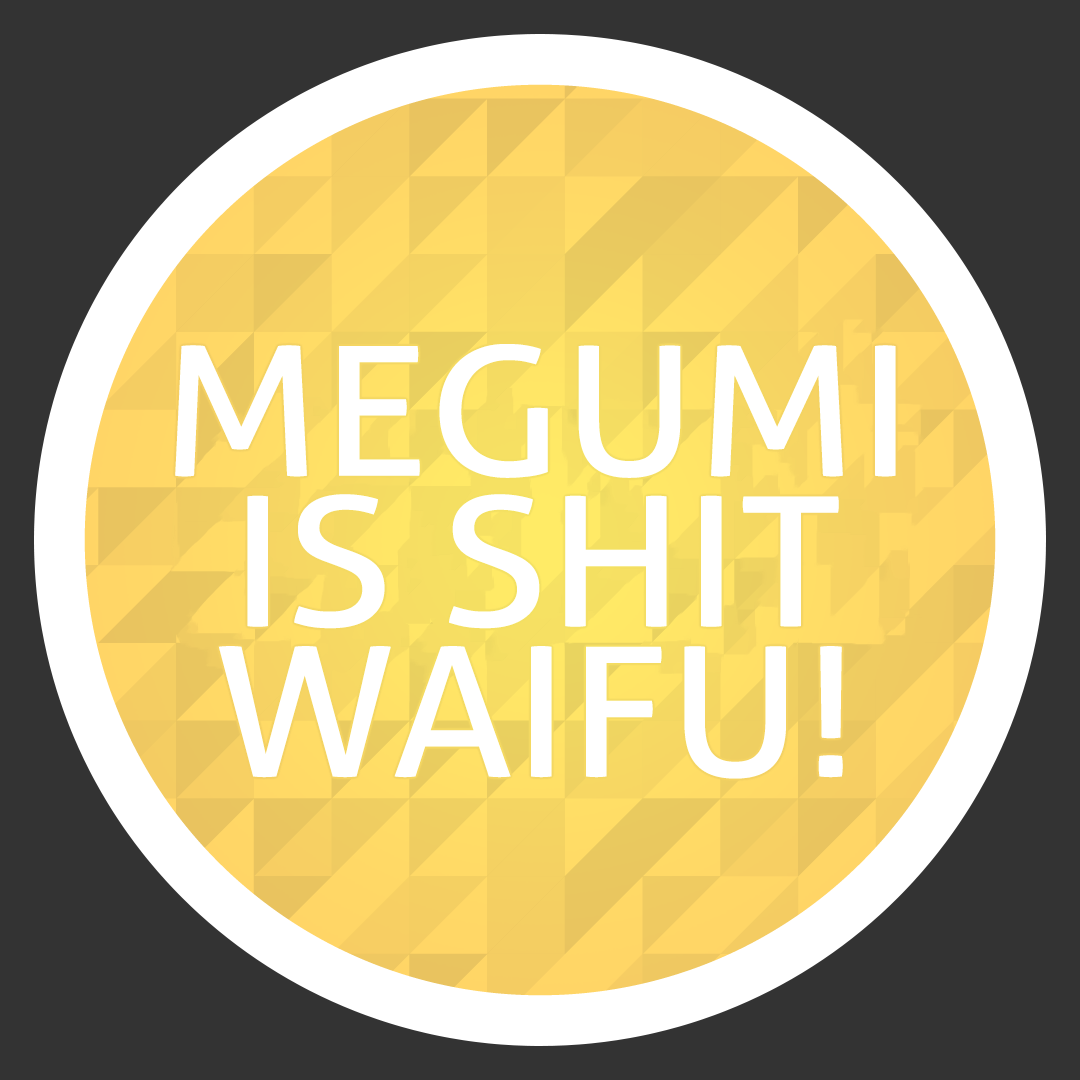
<style>
.page{position:relative;width:1080px;height:1080px;background:#333333}
.page>*{position:absolute;margin:0}
.t1{font:180px "Aller";color:#ffffff;scale:1.1 1}
</style>
<div class="page">
<p class="t1" style="left:175px;top:344px;width:721px;height:435px;text-align:center">MEGUMI<br>IS SHIT<br>WAIFU!</p>
</div>
